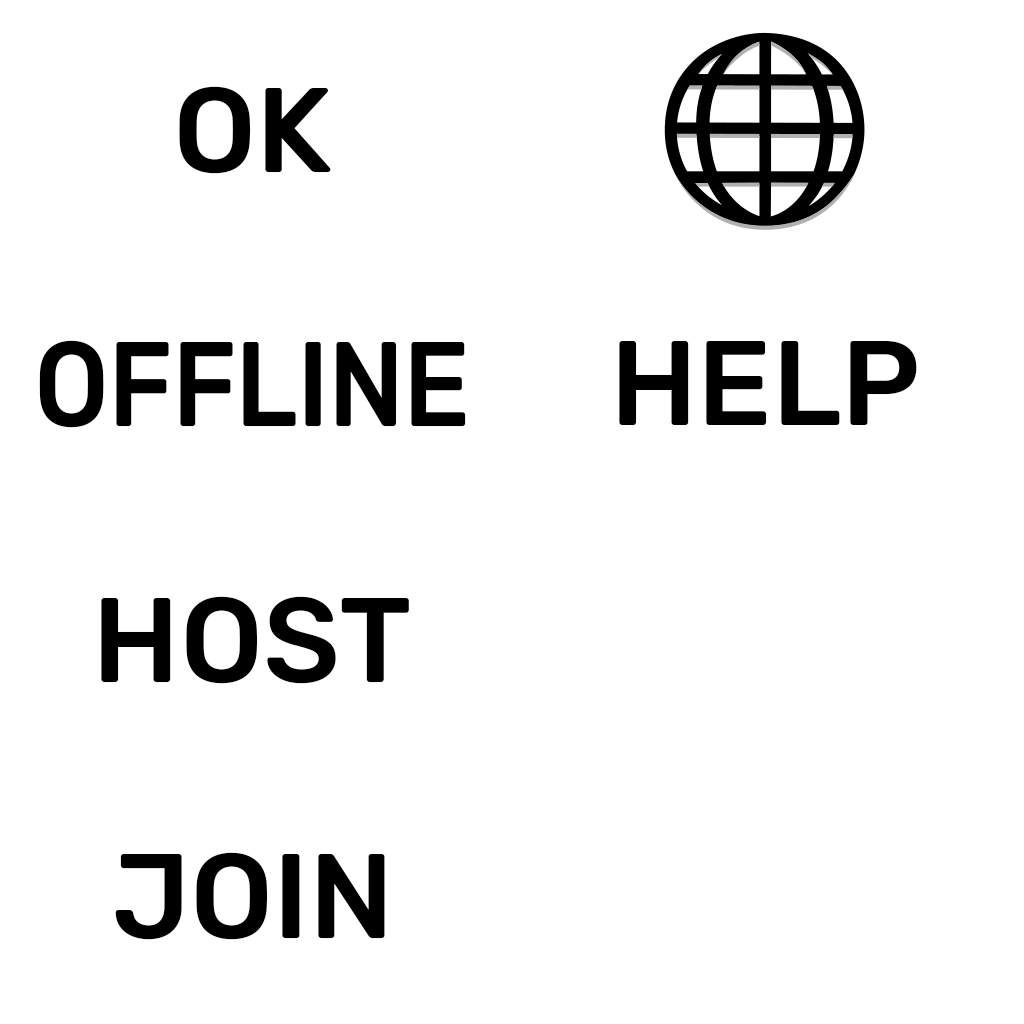
<style>
.page{position:relative;width:1024px;height:1024px;background:#ffffff}
.page>*{position:absolute;margin:0}
.t1{font:120px "Rubik-Medium";color:#000000}
.t2{font:120px "Rubik-Medium";letter-spacing:-0.01em;color:#000000;scale:0.9 1}
</style>
<div class="page">
<p class="t1" style="left:179px;top:86px;width:152px;height:88px">OK</p>
<p class="t2" style="left:39px;top:340px;width:427px;height:88px">OFFLINE</p>
<p class="t1" style="left:619px;top:341px;width:298px;height:84px">HELP</p>
<p class="t1" style="left:101px;top:596px;width:308px;height:88px">HOST</p>
<p class="t1" style="left:115px;top:852px;width:270px;height:88px">JOIN</p>
</div>
